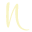
<style>
.page{position:relative;width:32px;height:32px;background:#ffffff}
.page>*{position:absolute;margin:0}
.t1{font:30.6px "Montez-Regular";color:#f8f4c4}
</style>
<div class="page">
<p class="t1" style="left:6px;top:2px;width:24px;height:29px">N</p>
</div>
